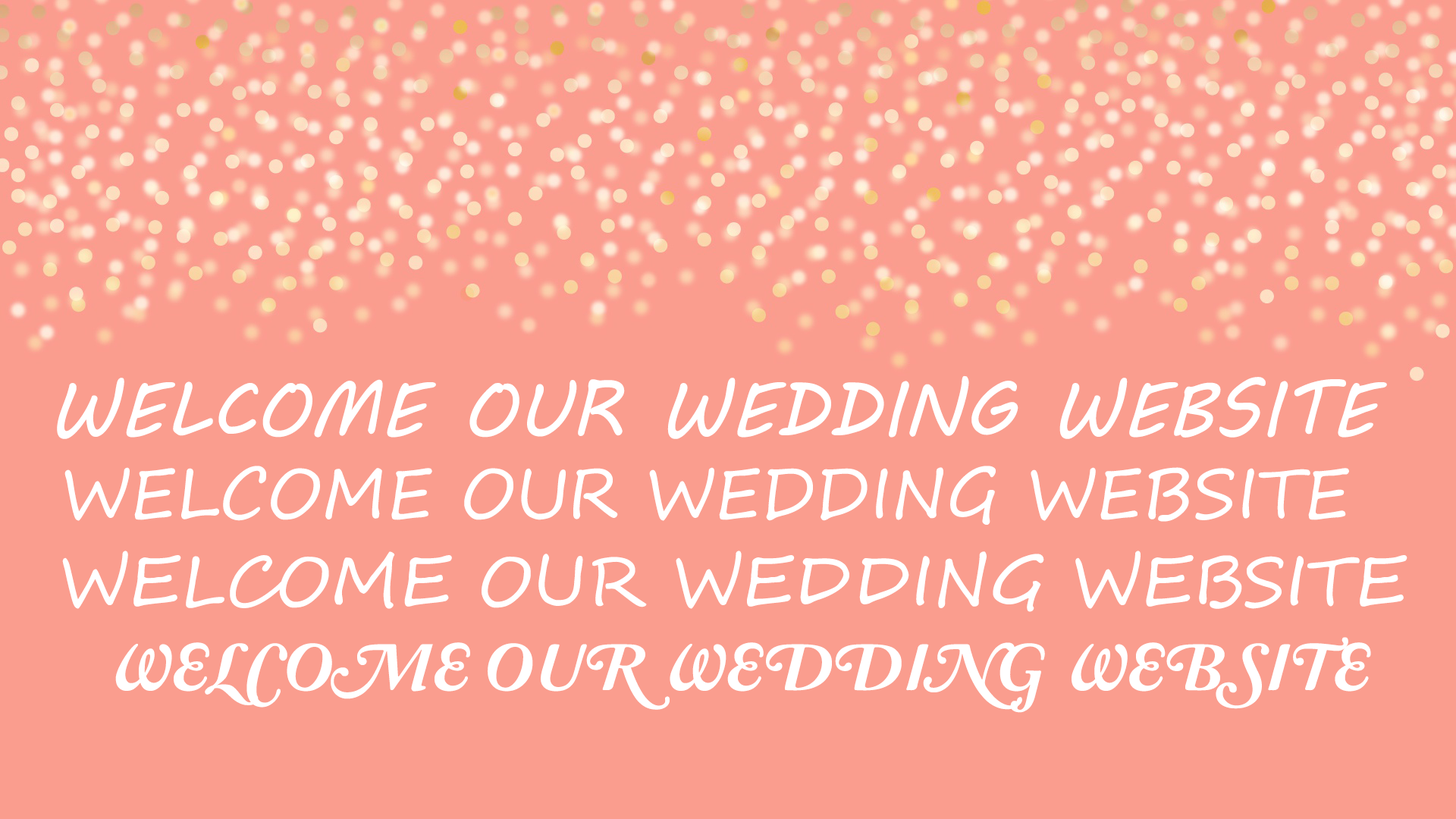
<style>
.page{position:relative;width:1456px;height:819px;background:#fa9d8e}
.page>*{position:absolute;margin:0}
.t1{font:75.8px "MVBoli";color:#ffffff}
.t2{font:68.2px "SegoePrint";color:#ffffff}
.t3{font:68.2px "SegoeScript";color:#ffffff}
.t4{font:68.2px "Amperzand";color:#ffffff}
</style>
<div class="page">
<p class="t1" style="left:57px;top:375px;width:1330px;height:64px">WELCOME OUR WEDDING WEBSITE</p>
<p class="t2" style="left:64px;top:466px;width:1285px;height:59px">WELCOME OUR WEDDING WEBSITE</p>
<p class="t3" style="left:62px;top:551px;width:1345px;height:61px">WELCOME OUR WEDDING WEBSITE</p>
<p class="t4" style="left:115px;top:637px;width:1256px;height:76px">WELCOME OUR WEDDING WEBSITE</p>
</div>
